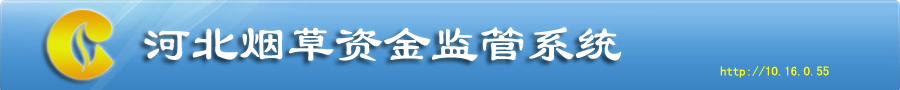
<style>
.page{position:relative;width:900px;height:90px}
.page>*{position:absolute;margin:0}
.t1{font:51.9px "LiSu";color:#ffffff;scale:0.92 1}
.t2{font:13px "SimHei";color:#fafd1b}
</style>
<div class="page">
<p class="t1" style="left:144px;top:27px;width:478px;height:34px">河北烟草资金监管系统</p>
<p class="t2" style="left:720px;top:66px;width:109px;height:12px">http://10.16.0.55</p>
</div>
